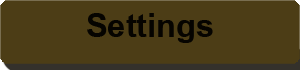
<style>
.page{position:relative;width:300px;height:70px;background:#4c3d16}
.page>*{position:absolute;margin:0}
.t1{font:50px "BrowalliaUPC-Bold";color:#060400}
</style>
<div class="page">
<p class="t1" style="left:87px;top:13px;width:126px;height:30px">Settings</p>
</div>
